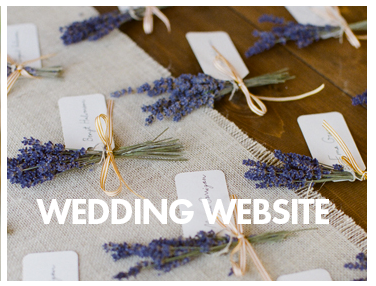
<style>
.page{position:relative;width:376px;height:286px}
.page>*{position:absolute;margin:0}
.t1{font:36px "FuturaPT-Heavy";letter-spacing:-0.05em;color:#ffffff;text-transform:uppercase}
</style>
<div class="page">
<p class="t1" style="left:36px;top:199px;width:293px;height:25px">WEDDING WEBSITE</p>
</div>
